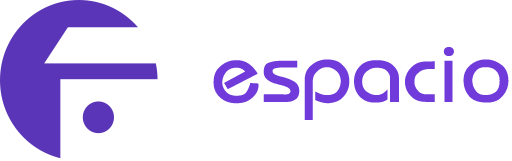
<style>
.page{position:relative;width:512px;height:161px;background:#ffffff}
.page>*{position:absolute;margin:0}
.t1{font:85.4px "Bauhaus";color:#703bda;scale:1.05 1}
</style>
<div class="page">
<p class="t1" style="left:213px;top:47px;width:296px;height:73px">espacio</p>
</div>
